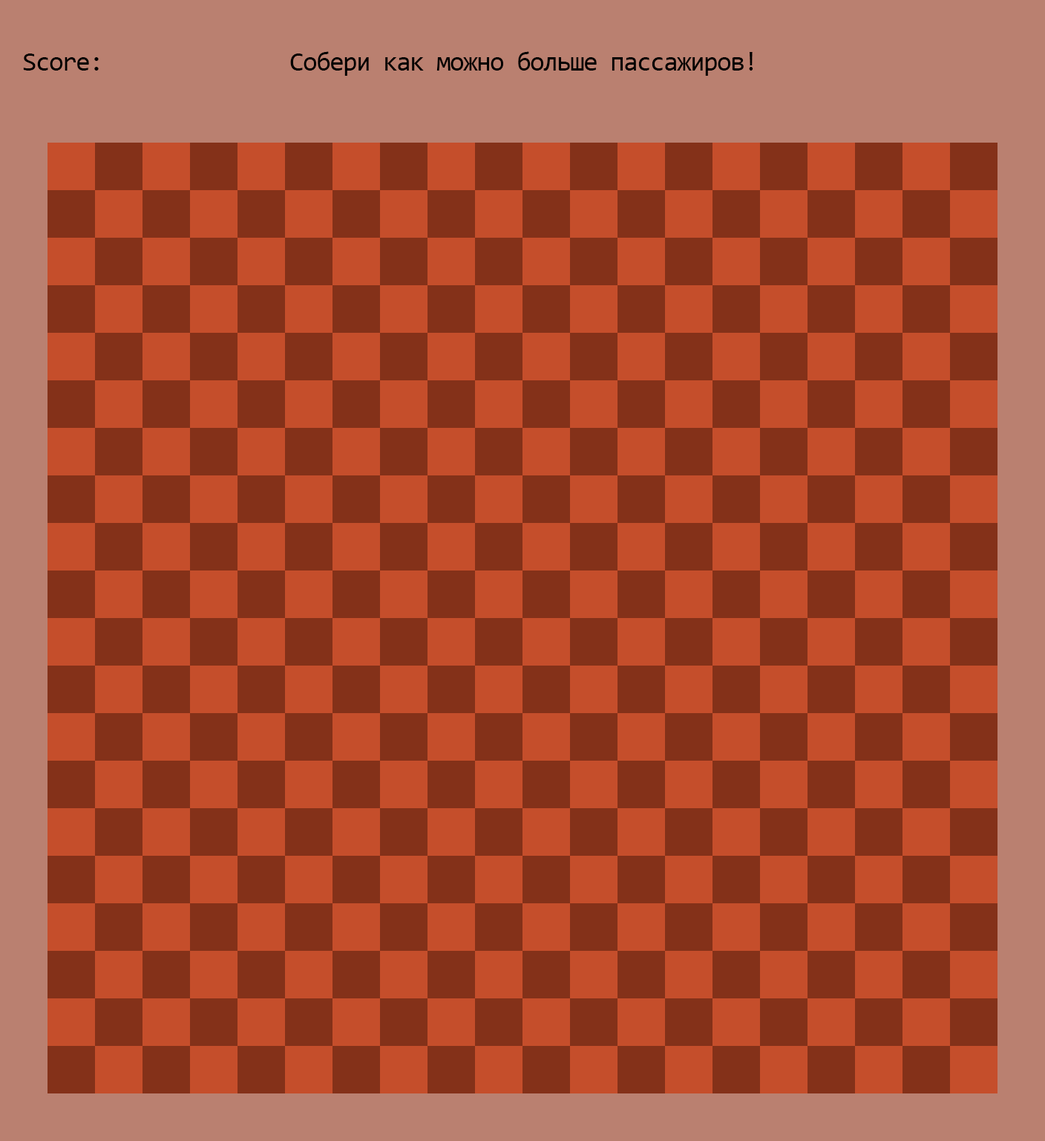
<style>
.page{position:relative;width:1045px;height:1141px;background:#c54e2b}
.page>*{position:absolute;margin:0}
.t1{font:26.7px "Consolas";letter-spacing:-0.05em;color:#000000}
</style>
<div class="page">
<p class="t1" style="left:23px;top:53px;width:76px;height:18px">Score:</p>
<p class="t1" style="left:290px;top:51px;width:464px;height:25px">Собери как можно больше пассажиров!</p>
</div>
